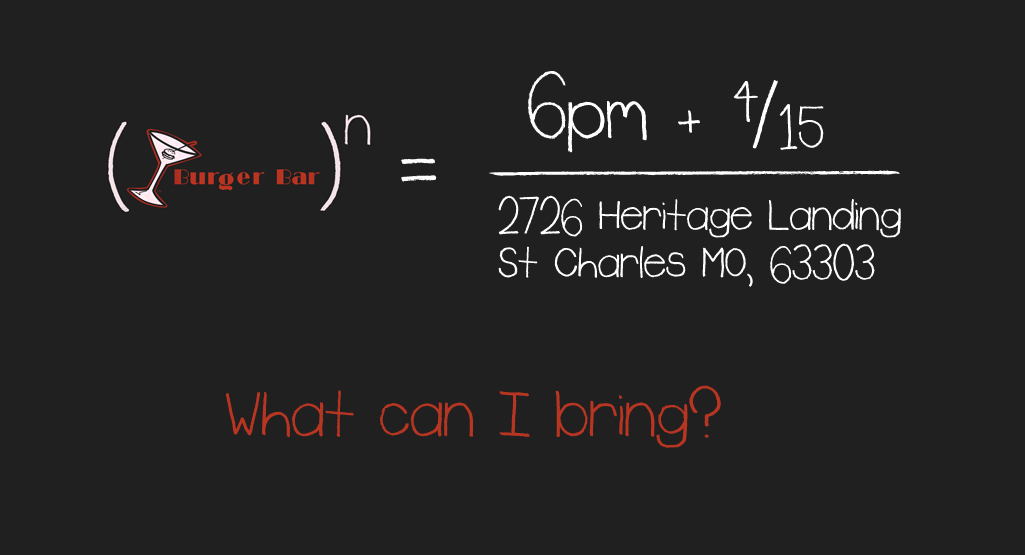
<style>
.page{position:relative;width:1025px;height:555px;background:#202020}
.page>*{position:absolute;margin:0}
.t1{font:89.5px "Rudiment";color:#ffffff}
.t2{font:76.7px "Rudiment";color:#ffffff}
.t3{font:57.6px "Rudiment";color:#ffffff}
.t4{font:116.7px "Rudiment";color:#ffffff}
.t5{font:83.3px "Rudiment";color:#ffffff;scale:7.08 1}
.t6{font:49.8px/47.3px "Rudiment";color:#ffffff}
.t7{font:75px "Rudiment";color:#b83521}
</style>
<div class="page">
<p class="t1" style="left:528px;top:71px;width:250px;height:82px">6pm <span class="t2">+ </span> /</p>
<p class="t3" style="left:733px;top:81px;width:25px;height:42px">4</p>
<p class="t3" style="left:779px;top:104px;width:45px;height:46px">15</p>
<p class="t4" style="left:401px;top:158px;width:36px;height:24px">=</p>
<p class="t5" style="left:489px;top:170px;width:411px;height:6px">_</p>
<p class="t6" style="left:498px;top:195px;width:403px;height:92px">2726 Heritage Landing<br>St Charles MO, 63303</p>
<p class="t7" style="left:226px;top:385px;width:495px;height:63px">What can I bring?</p>
</div>
